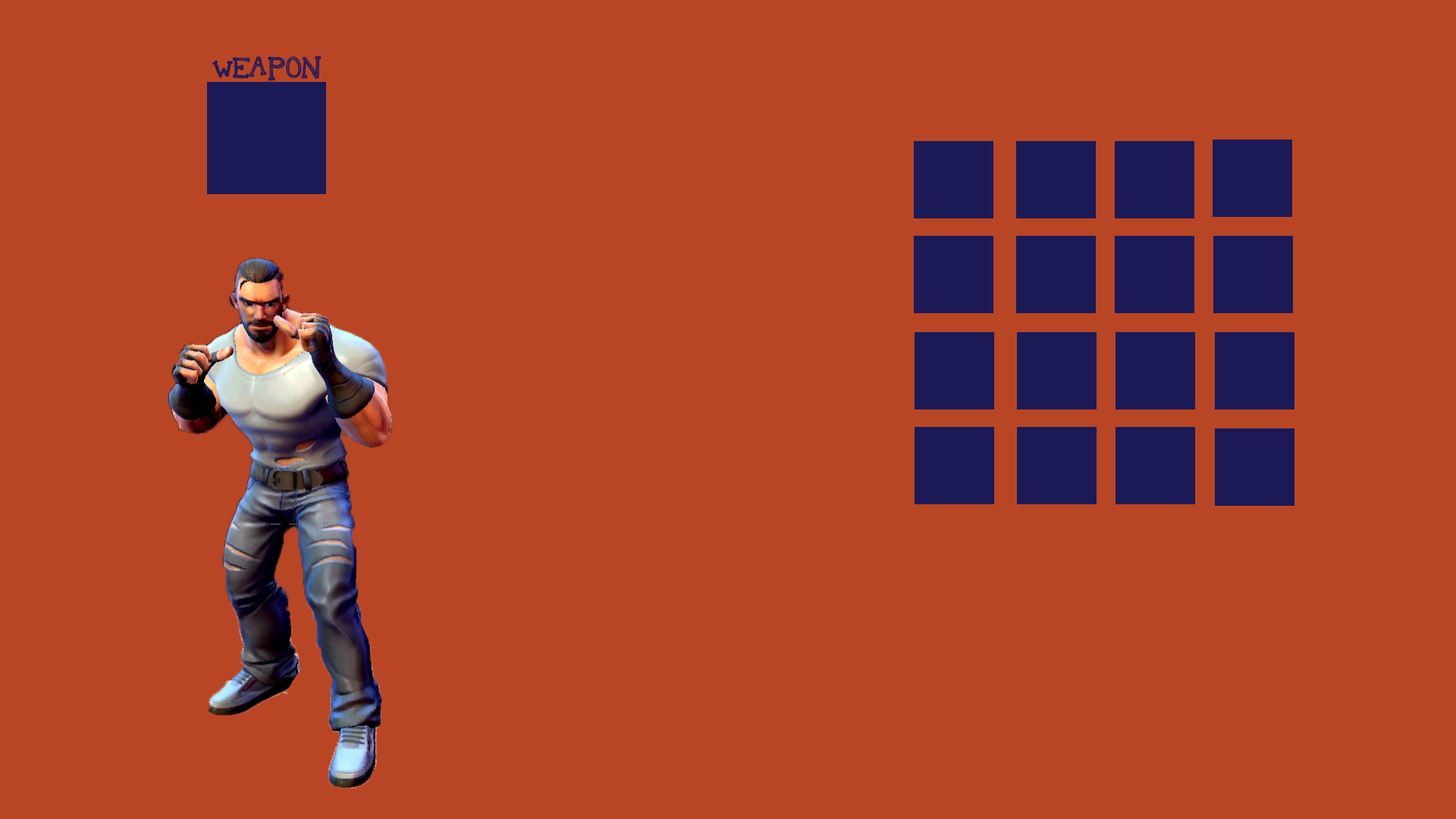
<style>
.page{position:relative;width:1456px;height:819px;background:#b84625}
.page>*{position:absolute;margin:0}
.t1{font:25.8px "KBREINDEERGAMES";color:#1c1957}
</style>
<div class="page">
<p class="t1" style="left:212px;top:56px;width:110px;height:25px">wEAPON</p>
</div>
